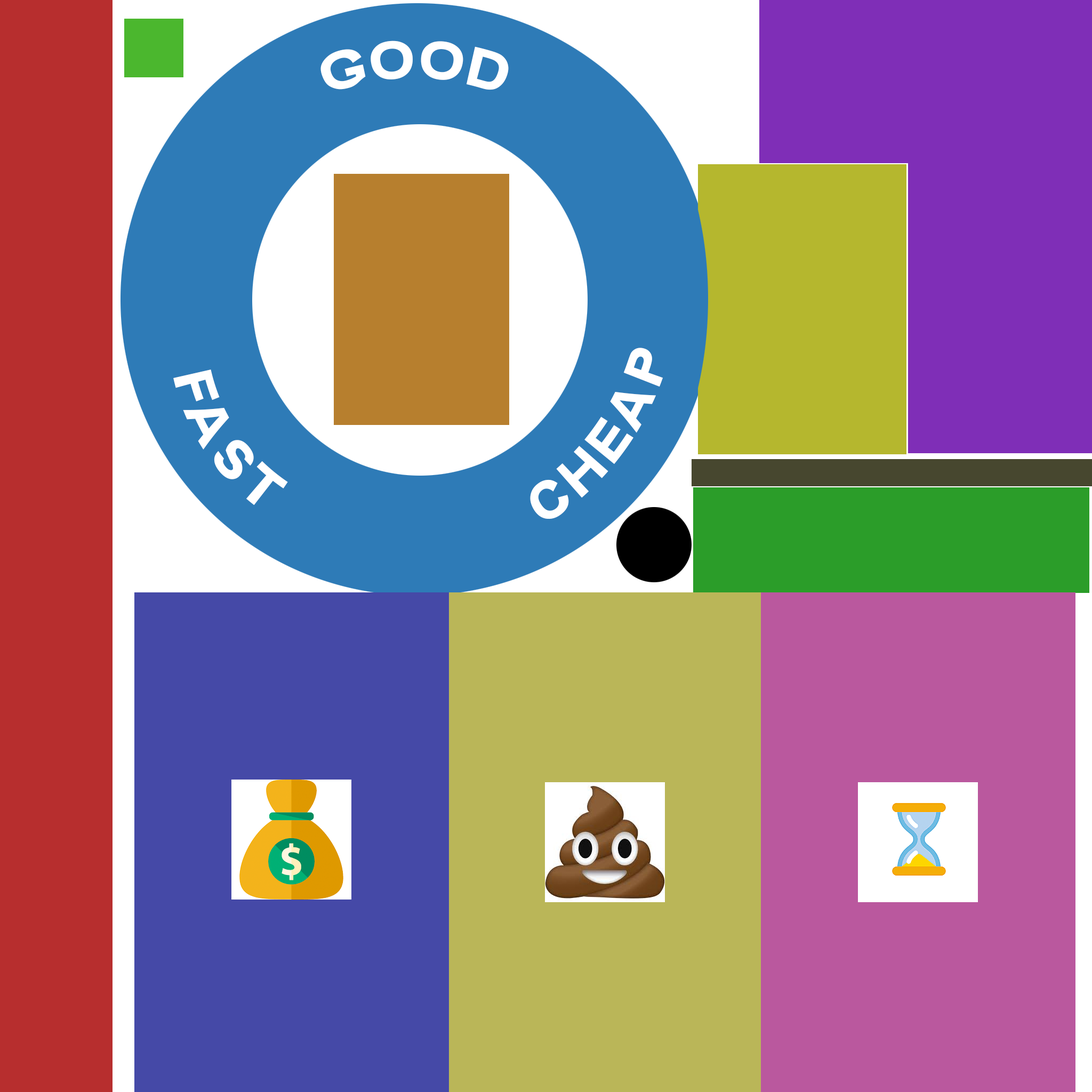
<style>
.page{position:relative;width:1092px;height:1092px}
.page>*{position:absolute;margin:0}
.t1{font:53.3px "Arial-BoldMT";color:#ffffff}
</style>
<div class="page">
<p class="t1" style="left:320px;top:41px;width:189px;height:49px">GOOD</p>
<p class="t1" style="left:530px;top:348px;width:133px;height:171px;rotate:-54deg">CHEAP</p>
<p class="t1" style="left:173px;top:370px;width:115px;height:135px;rotate:56deg">FAST</p>
</div>
